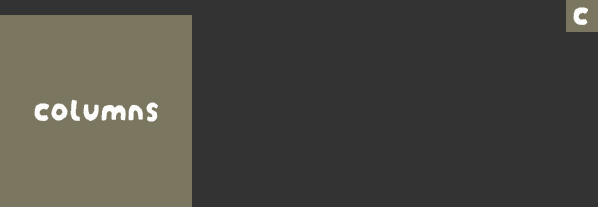
<style>
.page{position:relative;width:598px;height:207px;background:#333333}
.page>*{position:absolute;margin:0}
.t1{font:36px "DarumadropOne-Regular";color:#fcfdfa}
</style>
<div class="page">
<p class="t1" style="left:573px;top:7px;width:15px;height:18px">c</p>
<p class="t1" style="left:34px;top:99px;width:124px;height:23px">columns</p>
</div>
